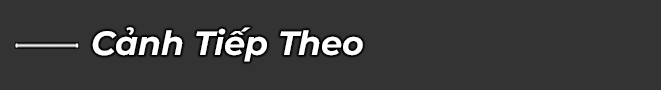
<style>
.page{position:relative;width:661px;height:90px;background:#333333}
.page>*{position:absolute;margin:0}
.t1{font:57.3px "Montserrat-BoldItalic";color:#ffffff}
</style>
<div class="page">
<p class="t1" style="left:92px;top:27px;width:271px;height:35px">Cảnh Tiếp Theo</p>
</div>
